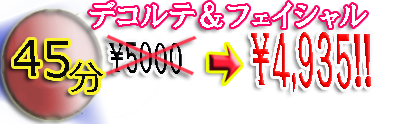
<style>
.page{position:relative;width:400px;height:124px;background:#ffffff}
.page>*{position:absolute;margin:0}
.t1{font:29.2px "HGPSoeiPresenceEB";color:#ffffff}
.t2{font:49.2px "Meiryo";color:#0c0c0c}
.t3{font:65.9px "HGPSoeiPresenceEB";scale:0.52 1}
.t4{font:37.4px "HGPSoeiPresenceEB";scale:0.71 1}
.t5{font:34.4px "Meiryo";color:#0c0c0c;scale:1.04 1}
</style>
<div class="page">
<p class="t1" style="left:89px;top:2px;width:278px;height:26px">デコルテ＆フェイシャル</p>
<p class="t2" style="left:14px;top:40px;width:55px;height:38px">45</p>
<p class="t3" style="left:251px;top:32px;width:120px;height:60px;rotate:1deg">\4,935!!</p>
<p class="t4" style="left:109px;top:42px;width:73px;height:32px;rotate:1deg">\5000</p>
<p class="t5" style="left:69px;top:62px;width:34px;height:30px">分</p>
</div>
